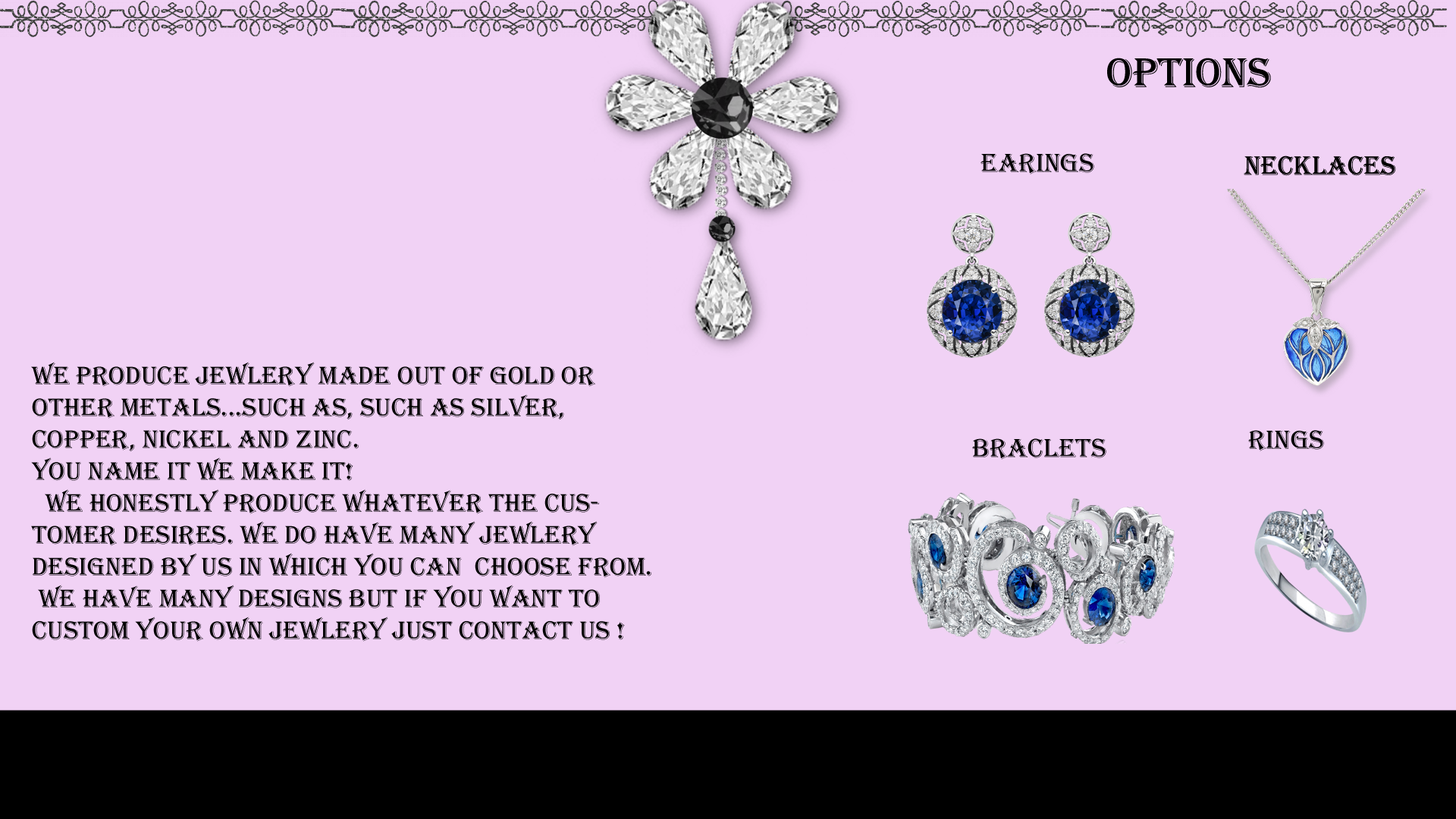
<style>
.page{position:relative;width:1456px;height:819px;background:#f1d2f5}
.page>*{position:absolute;margin:0}
.t1{font:42.5px "Algerian";color:#000000}
.t2{font:27.3px "Algerian";color:#000000}
.t3{font:26.5px "Algerian";color:#000000}
</style>
<div class="page">
<p class="t1" style="left:1107px;top:58px;width:164px;height:30px">OPTIONS</p>
<p class="t2" style="left:981px;top:153px;width:113px;height:21px">eARINGS</p>
<p class="t2" style="left:1244px;top:155px;width:152px;height:21px">nECKLACES</p>
<p class="t3" style="left:31px;top:362px;width:620px;height:280px">We produce jewlery made out of gold or other metals...Such as, such as silver, copper, nickel and zinc.<br>You name it we make it!<br>  We honestly produce whatever the customer desires. We do have many jewlery DESIGNED BY US IN WHICH YOU CAN  choose from. <br> We have many designs but if you want to custom your own jewlery just contact us !</p>
<p class="t2" style="left:1248px;top:430px;width:76px;height:21px">rINGS</p>
<p class="t2" style="left:972px;top:438px;width:134px;height:22px">bRACLETS</p>
</div>
